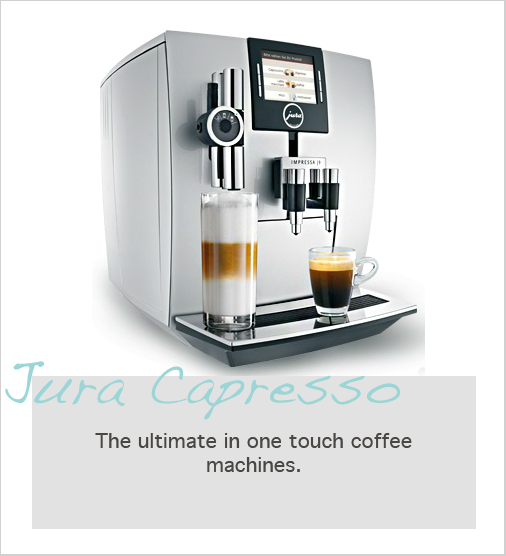
<style>
.page{position:relative;width:506px;height:556px;background:#ffffff}
.page>*{position:absolute;margin:0}
.t1{font:56px "Handwriting-Dakota";color:#9bd5d5}
.t2{font:20px "Geneva";color:#484743}
</style>
<div class="page">
<p class="t1" style="left:5px;top:361px;width:395px;height:59px">Jura Capresso</p>
<p class="t2" style="left:95px;top:433px;width:317px;height:39px;text-align:center">The ultimate in one touch coffee <br>machines.</p>
</div>
